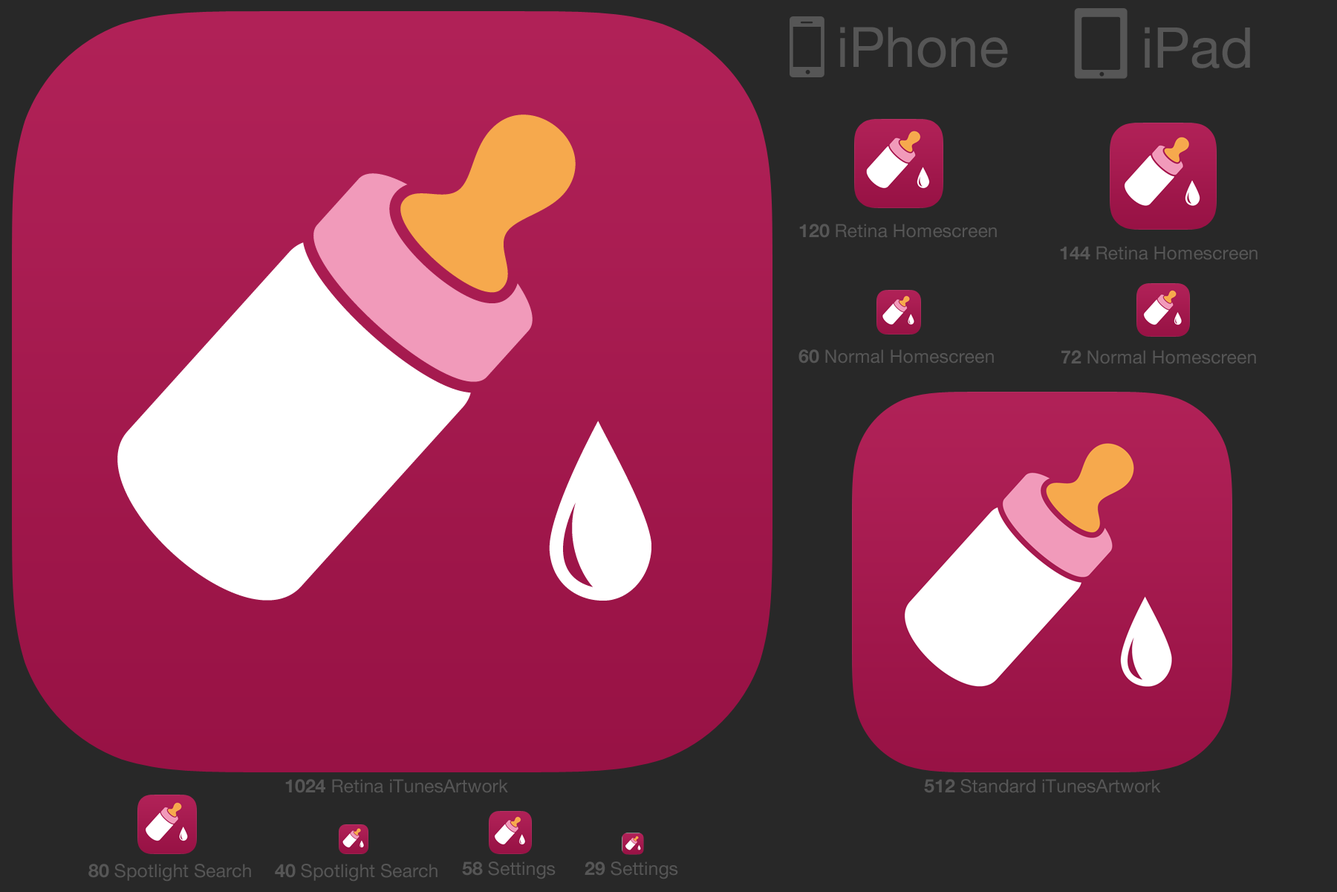
<style>
.page{position:relative;width:1337px;height:892px;background:#282828}
.page>*{position:absolute;margin:0}
.t1{font:55.7px "HelveticaNeue";color:#565656}
.t2{font:56.3px "HelveticaNeue";color:#565656}
.t3{font:18.3px "HelveticaNeue";color:#565656}
.t4{font:18.3px "HelveticaNeue-Bold";color:#565656}
</style>
<div class="page">
<p class="t1" style="left:840px;top:27px;width:168px;height:41px">iPhone</p>
<p class="t2" style="left:1145px;top:27px;width:105px;height:41px">iPad</p>
<p class="t3" style="left:799px;top:224px;width:198px;height:14px"><span class="t4">120 </span>Retina Homescreen</p>
<p class="t3" style="left:1060px;top:246px;width:198px;height:14px"><span class="t4">144 </span>Retina Homescreen</p>
<p class="t3" style="left:799px;top:349px;width:195px;height:14px"><span class="t4">60 </span>Normal Homescreen</p>
<p class="t3" style="left:1062px;top:350px;width:194px;height:14px"><span class="t4">72 </span>Normal Homescreen</p>
<p class="t3" style="left:285px;top:779px;width:223px;height:14px"><span class="t4">1024 </span>Retina iTunesArtwork</p>
<p class="t3" style="left:924px;top:779px;width:237px;height:14px"><span class="t4">512 </span>Standard iTunesArtwork</p>
<p class="t3" style="left:88px;top:863px;width:163px;height:18px"><span class="t4">80 </span>Spotlight Search</p>
<p class="t3" style="left:275px;top:863px;width:163px;height:18px"><span class="t4">40 </span>Spotlight Search</p>
<p class="t3" style="left:462px;top:861px;width:94px;height:18px"><span class="t4">58 </span>Settings</p>
<p class="t3" style="left:585px;top:861px;width:93px;height:18px"><span class="t4">29 </span>Settings</p>
</div>
